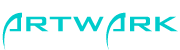
<style>
.page{position:relative;width:180px;height:50px;background:#ffffff}
.page>*{position:absolute;margin:0}
.t1{font:47.4px "Backslash";color:#00cccc;scale:0.76 1}
</style>
<div class="page">
<p class="t1" style="left:2px;top:12px;width:176px;height:38px">ARTWARK</p>
</div>
